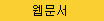
<style>
.page{position:relative;width:104px;height:21px;background:#f9cf31}
.page>*{position:absolute;margin:0}
.t1{font:12px "GulimChe";color:#000000}
</style>
<div class="page">
<p class="t1" style="left:33px;top:5px;width:33px;height:11px">웹문서</p>
</div>
